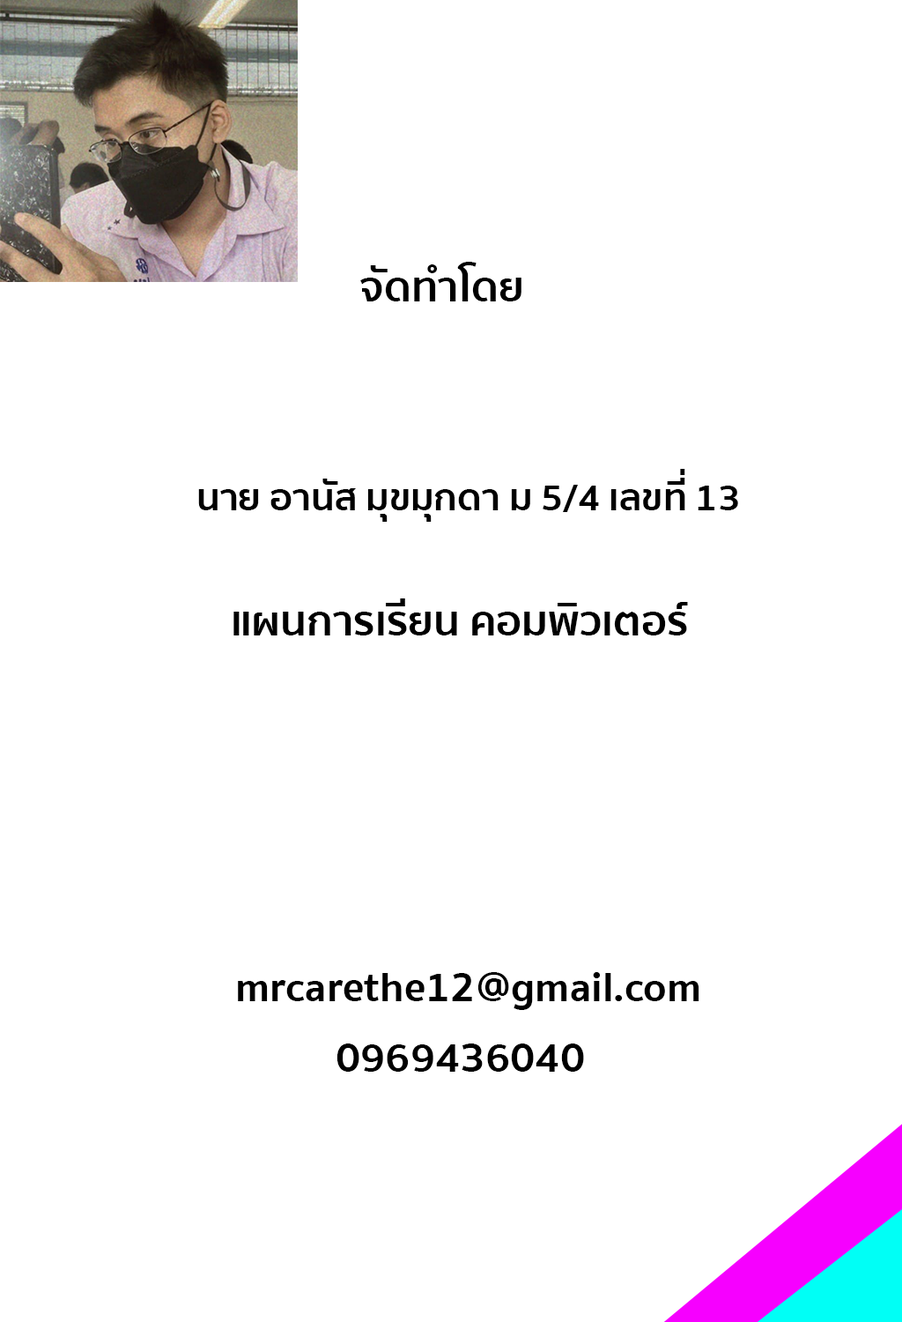
<style>
.page{position:relative;width:902px;height:1322px;background:#ffffff}
.page>*{position:absolute;margin:0}
.t1{font:42.3px "SukhumvitSet-Bold";color:#000000}
.t2{font:37.9px "SukhumvitSet-Bold";color:#000000}
</style>
<div class="page">
<p class="t1" style="left:360px;top:262px;width:162px;height:39px">จัดทำโดย</p>
<p class="t2" style="left:198px;top:469px;width:540px;height:53px">นาย อานัส มุขมุกดา ม 5/4 เลขที่ 13</p>
<p class="t1" style="left:233px;top:598px;width:455px;height:37px">แผนการเรียน คอมพิวเตอร์</p>
<p class="t1" style="left:238px;top:972px;width:462px;height:38px">mrcarethe12@gmail.com</p>
<p class="t1" style="left:337px;top:1043px;width:247px;height:28px">0969436040</p>
</div>
